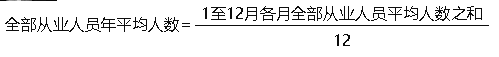
<style>
.page{position:relative;width:499px;height:57px;background:#ffffff}
.page>*{position:absolute;margin:0}
.t1{font:16px "MicrosoftYaHei";letter-spacing:-0.005em;color:#0d0d0d}
</style>
<div class="page">
<p class="t1" style="left:203px;top:6px;width:279px;height:15px">1至12月各月全部从业人员平均人数之和</p>
<p class="t1" style="left:5px;top:17px;width:185px;height:15px">全部从业人员年平均人数=</p>
<p class="t1" style="left:335px;top:34px;width:15px;height:12px">12</p>
</div>
